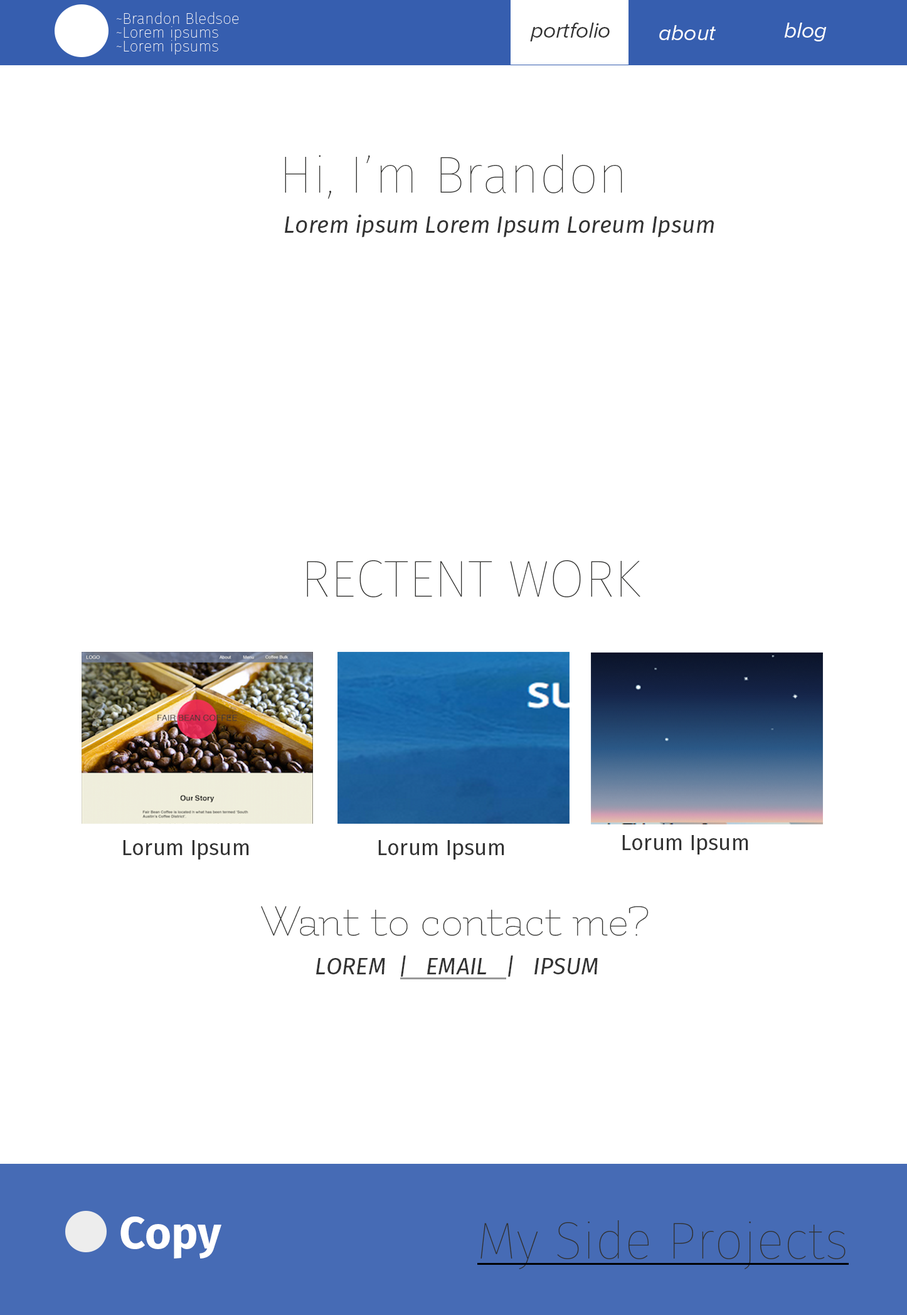
<style>
.page{position:relative;width:907px;height:1315px;background:#ffffff}
.page>*{position:absolute;margin:0}
.t1{font:15.4px "FiraSans-Hair";color:#ffffff}
.t2{font:22px "ProximaNova-RegularIt";color:#333333}
.t3{font:22px "ProximaNova-RegularIt";color:#ffffff}
.t4{font:52px "FiraSans-Hair";color:#31312f}
.t5{font:23.2px "FiraSans-Italic";color:#333333}
.t6{font:21.7px "FiraSans-Regular";color:#333333}
.t7{font:47.7px "Flamenco-Light";color:#31312f}
.t8{font:45.2px "FiraSans-Bold";color:#ffffff}
.t9{font:51.7px "FiraSans-Hair";color:#31312f}
</style>
<div class="page">
<p class="t1" style="left:117px;top:12px;width:122px;height:12px">~Brandon Bledsoe</p>
<p class="t1" style="left:117px;top:26px;width:101px;height:15px">~Lorem ipsums</p>
<p class="t2" style="left:530px;top:23px;width:80px;height:18px">portfolio</p>
<p class="t3" style="left:659px;top:25px;width:57px;height:15px">about</p>
<p class="t3" style="left:784px;top:23px;width:43px;height:18px">blog</p>
<p class="t1" style="left:117px;top:40px;width:101px;height:15px">~Lorem ipsums</p>
<p class="t4" style="left:285px;top:154px;width:337px;height:45px">Hi, I’m Brandon</p>
<p class="t5" style="left:285px;top:215px;width:429px;height:22px">Lorem ipsum Lorem Ipsum Loreum Ipsum</p>
<p class="t4" style="left:307px;top:560px;width:333px;height:37px">RECTENT WORK</p>
<p class="t6" style="left:123px;top:840px;width:126px;height:19px">Lorum Ipsum</p>
<p class="t6" style="left:378px;top:840px;width:126px;height:19px">Lorum Ipsum</p>
<p class="t6" style="left:622px;top:835px;width:126px;height:19px">Lorum Ipsum</p>
<p class="t7" style="left:261px;top:906px;width:388px;height:30px">Want to contact me?</p>
<p class="t5" style="left:316px;top:955px;width:282px;height:22px">LOREM  |   EMAIL   |   IPSUM</p>
<p class="t8" style="left:120px;top:1216px;width:101px;height:42px">Copy</p>
<p class="t9" style="left:480px;top:1220px;width:366px;height:49px">My Side Projects</p>
</div>
